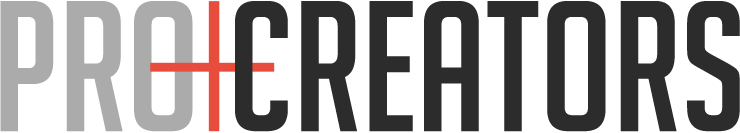
<style>
.page{position:relative;width:740px;height:133px;background:#ffffff}
.page>*{position:absolute;margin:0}
.t1{font:181.1px "BigNoodleTitling";color:#ababab}
.t2{font:181.1px "BigNoodleTitling";color:#2c2c2c}
</style>
<div class="page">
<p class="t1" style="left:0px;top:1px;width:193px;height:131px">pro</p>
<p class="t2" style="left:235px;top:1px;width:505px;height:131px">creators</p>
</div>
